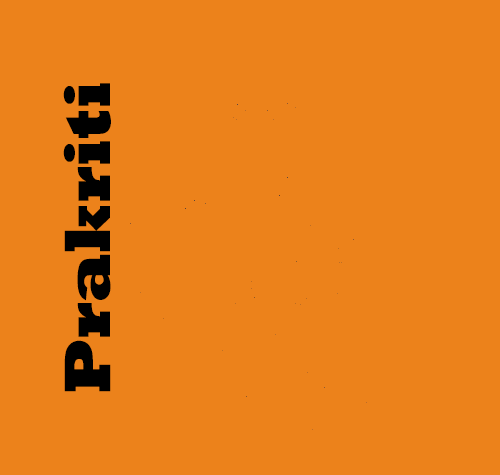
<style>
.page{position:relative;width:500px;height:475px;background:#ec821b}
.page>*{position:absolute;margin:0}
.t1{font:66.7px "Rockwell-ExtraBold";color:#000000}
</style>
<div class="page">
<p class="t1" style="left:63px;top:83px;width:48px;height:309px;rotate:-90deg">Prakriti</p>
</div>
